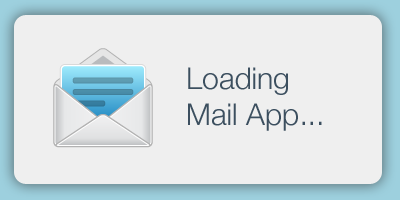
<style>
.page{position:relative;width:400px;height:200px;background:#efefef}
.page>*{position:absolute;margin:0}
.t1{font:30px "HelveticaNeue-Light";color:#3c4f5f}
</style>
<div class="page">
<p class="t1" style="left:188px;top:67px;width:134px;height:64px">Loading<br>Mail App...</p>
</div>
